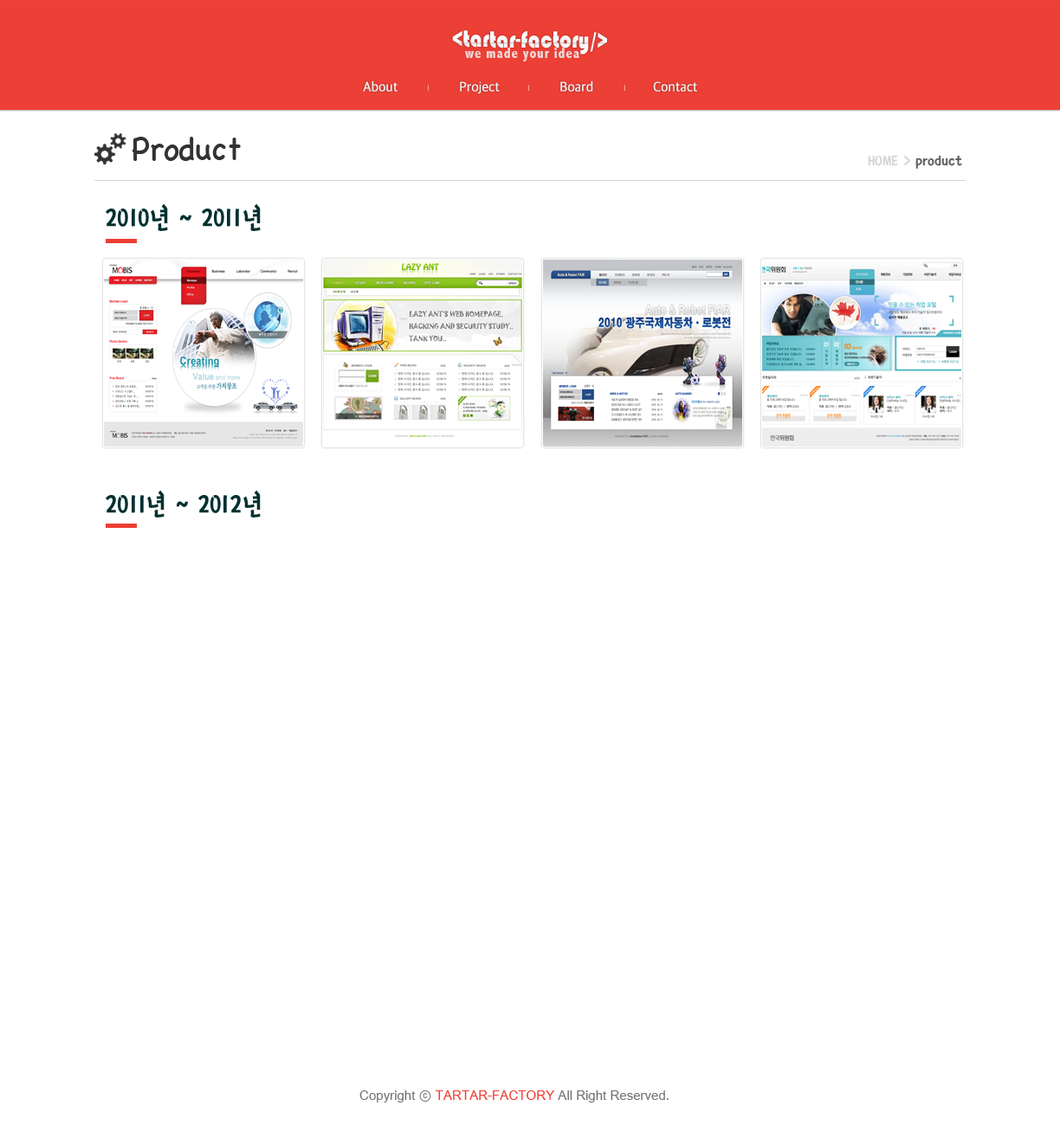
<style>
.page{position:relative;width:1060px;height:1125px;background:#ffffff}
.page>*{position:absolute;margin:0}
.t1{font:24.2px "Bauhaus93";color:#ffffff;scale:0.88 1}
.t2{font:14.7px "AbadiMT-CondensedExtraBold";letter-spacing:0.05em;color:#eeeeee;scale:0.95 1}
.t3{font:13.9px "AppleSDGothicNeo-Regular";letter-spacing:-0.01em;color:#ededed;font-weight:bold;scale:0.95 1}
.t4{font:32.9px "ChalkboardSE-Regular";color:#333333;scale:0.95 1}
.t5{font:17.3px "KoreanGST-R";color:#606060;scale:0.95 1}
.t6{font:17.3px "KoreanGST-R";color:#d5d5d5;scale:0.95 1}
.t7{font:31.2px "KoreanGST-R";color:#003030;scale:0.95 1}
.t8{font:13.9px "ArialUnicodeMS";letter-spacing:-0.005em;color:#727272;scale:0.95 1}
.t9{font:13.9px "ArialUnicodeMS";letter-spacing:-0.005em;color:#ec3f35;scale:0.95 1}
</style>
<div class="page">
<p class="t1" style="left:452px;top:30px;width:155px;height:25px;rotate:1deg">&lt;tartar-factory/&gt;</p>
<p class="t2" style="left:465px;top:48px;width:114px;height:13px;opacity:0.87">we made your idea</p>
<p class="t3" style="left:363px;top:81px;width:34px;height:11px">About</p>
<p class="t3" style="left:460px;top:81px;width:39px;height:12px">Project</p>
<p class="t3" style="left:560px;top:81px;width:33px;height:11px">Board</p>
<p class="t3" style="left:653px;top:81px;width:44px;height:11px">Contact</p>
<p class="t4" style="left:132px;top:137px;width:109px;height:24px">Product</p>
<p class="t5" style="left:867px;top:155px;width:95px;height:14px"><span class="t6">HOME &gt; </span>product</p>
<p class="t7" style="left:106px;top:203px;width:155px;height:28px">2010년 ~ 2011년</p>
<p class="t7" style="left:106px;top:490px;width:155px;height:28px">2011년 ~ 2012년</p>
<p class="t8" style="left:359px;top:1091px;width:309px;height:12px">Copyright ⓒ <span class="t9">TARTAR-FACTORY </span>All Right Reserved.</p>
</div>
